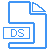
<style>
.page{position:relative;width:50px;height:50px;background:#ffffff}
.page>*{position:absolute;margin:0}
.t1{font:11px "ArialMT";color:#4095f5}
</style>
<div class="page">
<p class="t1" style="left:11px;top:29px;width:13px;height:8px">DS</p>
</div>
